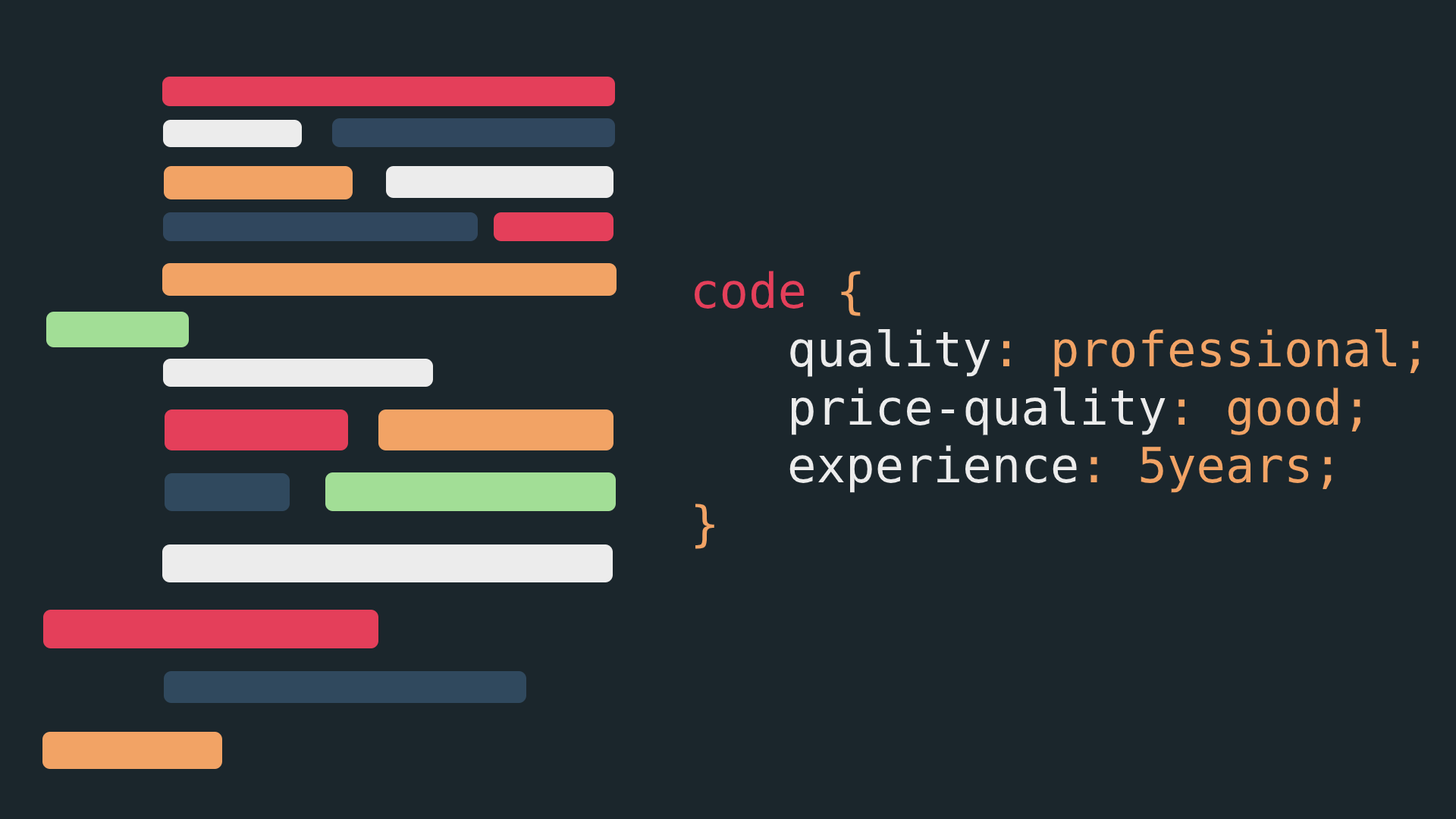
<style>
.page{position:relative;width:1456px;height:819px;background:#1b262c}
.page>*{position:absolute;margin:0}
.t1{font:48.5px "DejaVuSansMono";color:#f2a365}
.t2{font:48.5px "DejaVuSansMono";color:#e43f5a}
.t3{font:48.5px "DejaVuSansMono";color:#ececec}
</style>
<div class="page">
<p class="t1" style="left:695px;top:271px;width:724px;height:278px"><span class="t2">code </span>{<br> <span class="t3">quality</span>: professional;<br> <span class="t3">price-quality</span>: good;<br> <span class="t3">experience</span>: 5years; <br>}</p>
</div>
